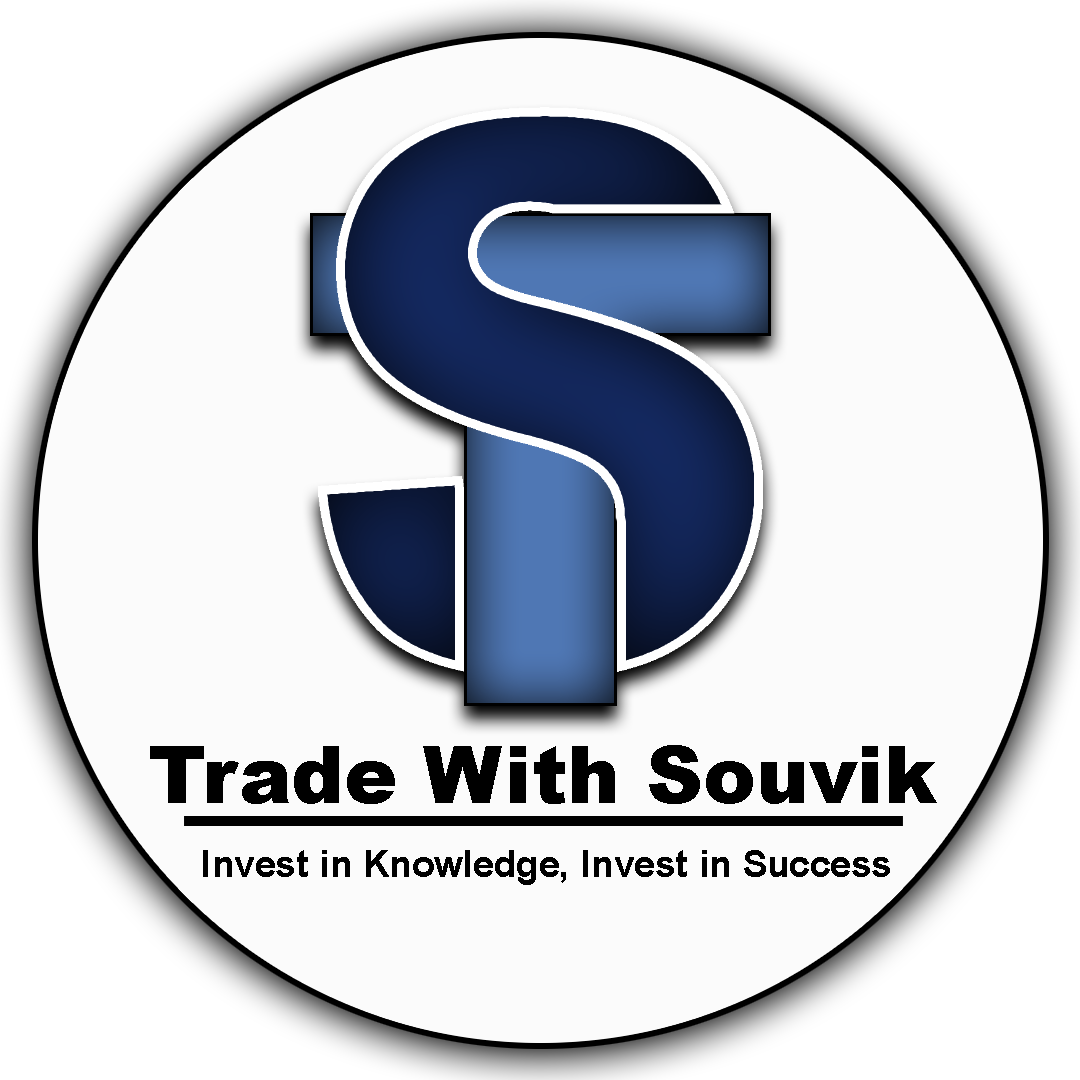
<style>
.page{position:relative;width:1080px;height:1080px;background:#fbfbfb}
.page>*{position:absolute;margin:0}
.t1{font:79.2px "Arial-Black";color:#000000}
.t2{font:37.5px "Arial-BoldMT";color:#000000}
</style>
<div class="page">
<p class="t1" style="left:150px;top:745px;width:787px;height:59px">Trade With Souvik</p>
<p class="t2" style="left:203px;top:850px;width:687px;height:35px">Invest in Knowledge, Invest in Success</p>
</div>
